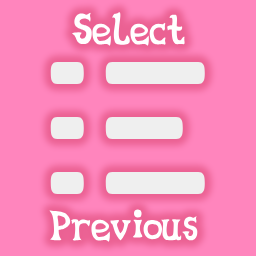
<style>
.page{position:relative;width:256px;height:256px;background:#ff85bd}
.page>*{position:absolute;margin:0}
.t1{font:45.2px "CelestiaReduxAltMedium";color:#ffffff}
</style>
<div class="page">
<p class="t1" style="left:72px;top:12px;width:113px;height:34px">Select</p>
<p class="t1" style="left:49px;top:209px;width:149px;height:33px">Previous</p>
</div>
